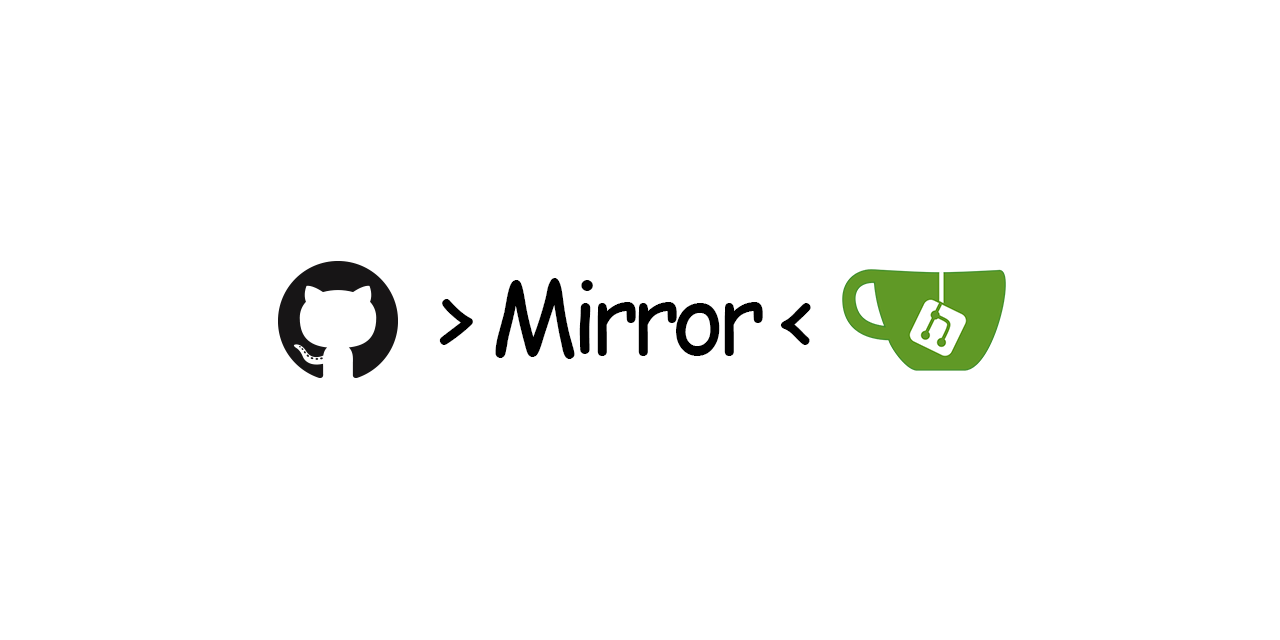
<style>
.page{position:relative;width:1280px;height:640px;background:#ffffff}
.page>*{position:absolute;margin:0}
.t1{font:100px "ComicSansMS";letter-spacing:-0.075em;color:#000000}
</style>
<div class="page">
<p class="t1" style="left:439px;top:278px;width:372px;height:81px">&gt; Mirror &lt;</p>
</div>
